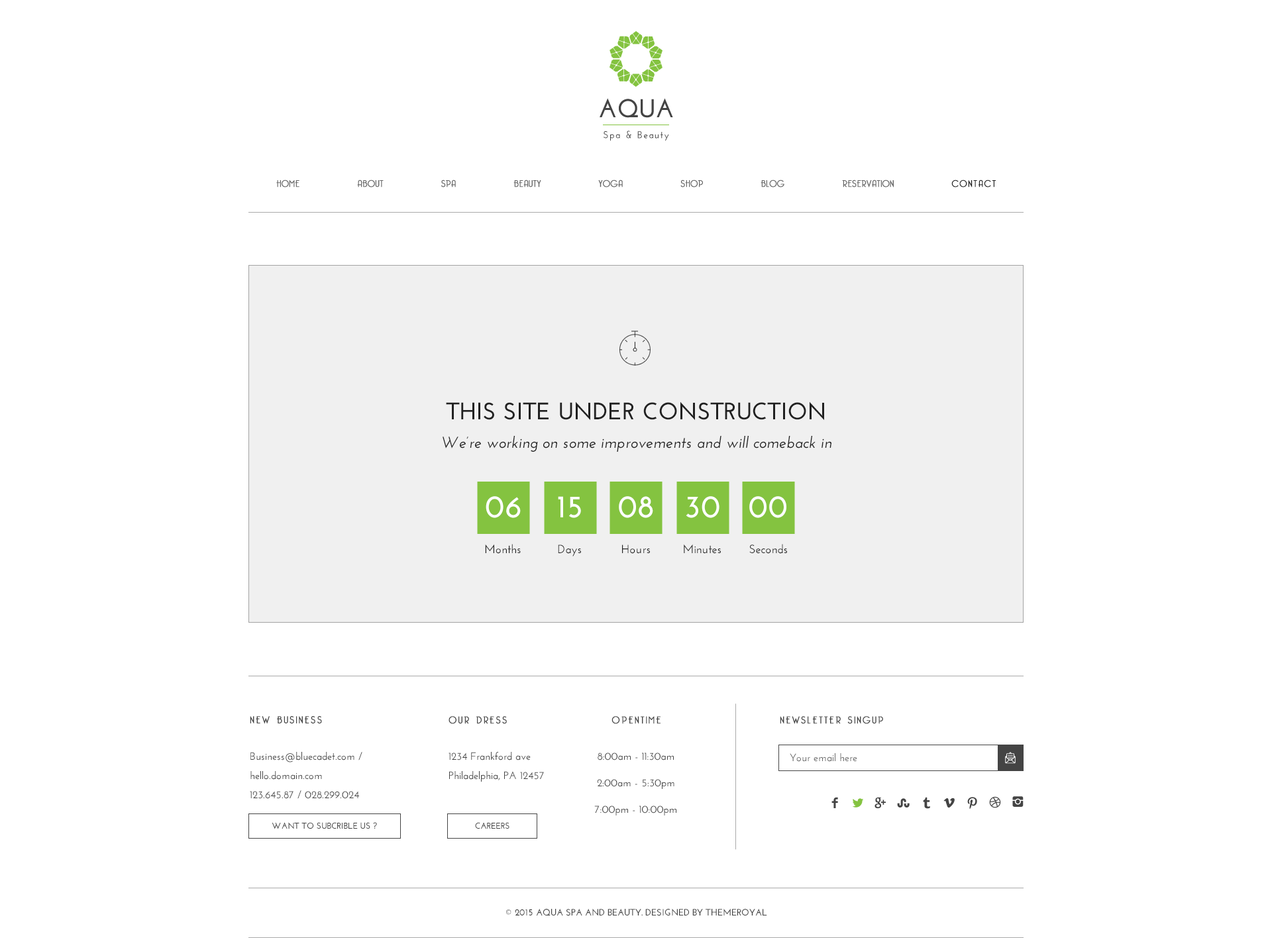
<style>
.page{position:relative;width:1272px;height:938px;background:#ffffff}
.page>*{position:absolute;margin:0}
.t1{font:9.3px "BelleroseLight";letter-spacing:0.02em;color:#666666;font-weight:bold}
.t2{font:9.3px "BelleroseLight";letter-spacing:0.12em;color:#212121;font-weight:bold}
.t3{font:15.9px/28.6px "JosefinSans-SemiBoldItalic";color:#212121}
.t4{font:23.8px/42.9px "JosefinSans-Bold";color:#212121}
.t5{font:31.8px "JosefinSans-Bold";color:#ffffff}
.t6{font:11.9px "JosefinSans-SemiBold";color:#222222}
.t7{font:9.8px "BelleroseLight";letter-spacing:0.15em;color:#444444;font-weight:bold}
.t8{font:10.6px/19.1px "JosefinSans-SemiBold";color:#444444}
.t9{font:10.6px/26.5px "JosefinSans-SemiBold";color:#444444}
.t10{font:10.6px "JosefinSans-SemiBold";color:#666666}
.t11{font:8.6px "JosefinSans-Bold";color:#444444}
.t12{font:9.3px "JosefinSans-Bold";color:#444444}
</style>
<div class="page">
<p class="t1" style="left:276px;top:179px;width:719px;height:8px">HOME          ABOUT          SPA          BEAUTY          YOGA          SHOP          BLOG          RESERVATION          <span class="t2">CONTACT</span></p>
<p class="t3" style="left:442px;top:401px;width:389px;height:51px;text-align:center"><span class="t4">THIS SITE UNDER CONSTRUCTION<br></span>We’re working on some improvements and will comeback in</p>
<p class="t5" style="left:485px;top:496px;width:36px;height:22px">06</p>
<p class="t5" style="left:558px;top:496px;width:23px;height:22px">15</p>
<p class="t5" style="left:619px;top:496px;width:34px;height:22px">08</p>
<p class="t5" style="left:685px;top:496px;width:34px;height:22px">30</p>
<p class="t5" style="left:749px;top:496px;width:37px;height:22px">00</p>
<p class="t6" style="left:485px;top:544px;width:36px;height:10px">Months</p>
<p class="t6" style="left:558px;top:544px;width:23px;height:12px">Days</p>
<p class="t6" style="left:622px;top:544px;width:28px;height:10px">Hours</p>
<p class="t6" style="left:683px;top:544px;width:38px;height:10px">Minutes</p>
<p class="t6" style="left:749px;top:544px;width:38px;height:10px">Seconds</p>
<p class="t7" style="left:250px;top:716px;width:72px;height:8px">NEW BUSINESS</p>
<p class="t7" style="left:448px;top:716px;width:59px;height:8px">OUR DRESS</p>
<p class="t7" style="left:611px;top:716px;width:49px;height:8px">OPENTIME</p>
<p class="t7" style="left:779px;top:716px;width:104px;height:8px">NEWSLETTER SINGUP</p>
<p class="t8" style="left:250px;top:752px;width:112px;height:47px">Business@bluecadet.com / hello.domain.com<br>123.645.87 / 028.299.024</p>
<p class="t8" style="left:448px;top:752px;width:96px;height:29px">1234 Frankford ave <br>Philadelphia, PA 12457</p>
<p class="t9" style="left:594px;top:752px;width:82px;height:63px;text-align:center">8:00am - 11:30am<br>2:00am - 5:30pm<br>7:00pm - 10:00pm</p>
<p class="t10" style="left:789px;top:753px;width:68px;height:9px">Your email here</p>
<p class="t11" style="left:272px;top:822px;width:105px;height:7px">WANT TO SUBCRIBLE US ?</p>
<p class="t11" style="left:475px;top:822px;width:34px;height:6px">CAREERS</p>
<p class="t12" style="left:506px;top:908px;width:261px;height:8px">© 2015 AQUA SPA AND BEAUTY. DESIGNED BY THEMEROYAL</p>
</div>
